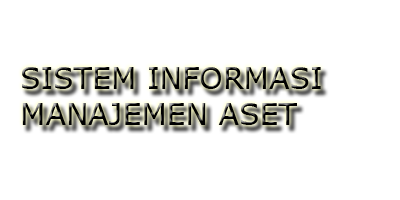
<style>
.page{position:relative;width:400px;height:200px;background:#ffffff}
.page>*{position:absolute;margin:0}
.t1{font:30px "Verdana"}
</style>
<div class="page">
<p class="t1" style="left:22px;top:67px;width:299px;height:58px">SISTEM INFORMASI <br>MANAJEMEN ASET</p>
</div>
